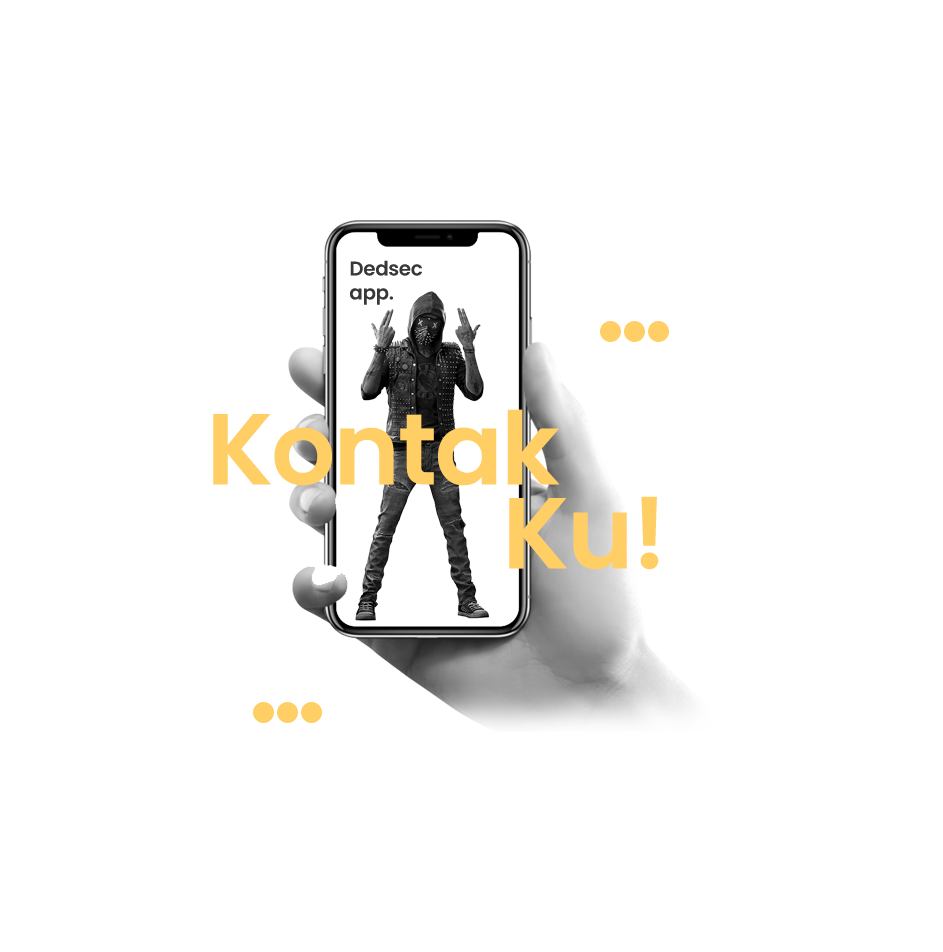
<style>
.page{position:relative;width:943px;height:952px;background:#ffffff}
.page>*{position:absolute;margin:0}
.t1{font:19.9px "Poppins-SemiBold";letter-spacing:-0.02em;color:#383838}
.t2{font:100.6px "Poppins-SemiBold";letter-spacing:-0.02em;color:#ffce65}
</style>
<div class="page">
<p class="t1" style="left:350px;top:260px;width:72px;height:45px">Dedsec <br>app.</p>
<p class="t2" style="left:213px;top:409px;width:347px;height:77px">Kontak</p>
<p class="t2" style="left:509px;top:496px;width:150px;height:74px">Ku!</p>
</div>
